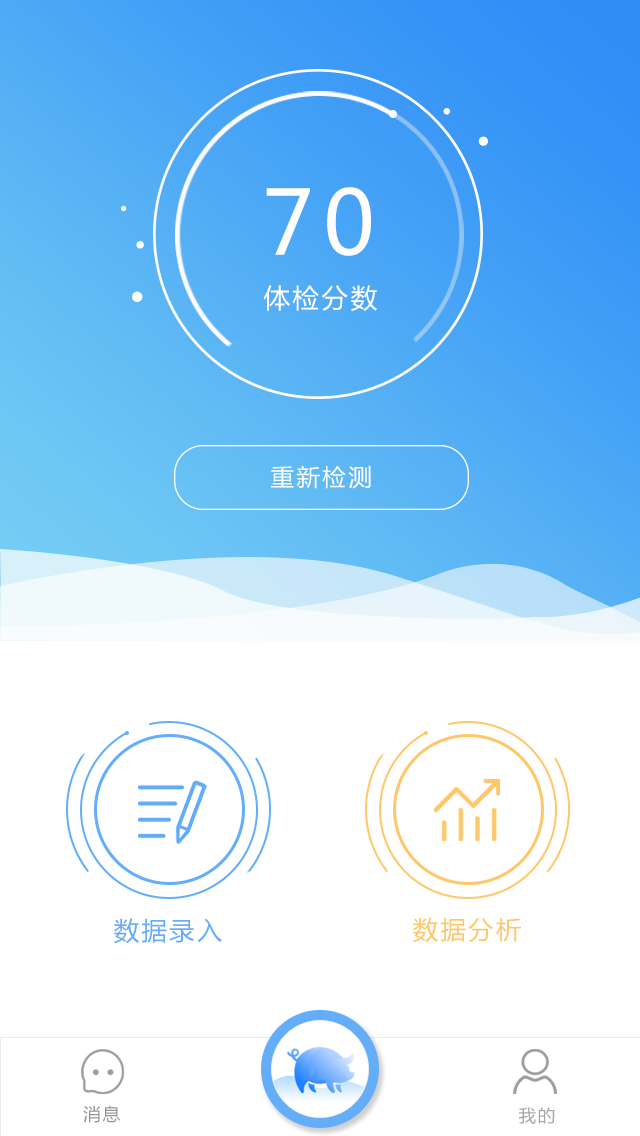
<style>
.page{position:relative;width:640px;height:1136px;background:#ffffff}
.page>*{position:absolute;margin:0}
.t1{font:88.1px "MicrosoftYaHei";letter-spacing:0.1em;color:#fffdfd}
.t2{font:26.4px "MicrosoftYaHei";letter-spacing:0.1em;color:#ffffff}
.t3{font:23.5px "MicrosoftYaHei";letter-spacing:0.1em;color:#fefeff}
.t4{font:25.3px "MicrosoftYaHei";letter-spacing:0.1em;color:#64adf9}
.t5{font:25.3px "MicrosoftYaHei";letter-spacing:0.1em;color:#ffc769}
.t6{font:17.5px "MicrosoftYaHei";letter-spacing:0.1em;color:#939292}
.t7{font:17.5px "MicrosoftYaHei";letter-spacing:0.1em;color:#a6a6a6}
</style>
<div class="page">
<p class="t1" style="left:266px;top:187px;width:105px;height:69px">70</p>
<p class="t2" style="left:263px;top:285px;width:114px;height:26px">体检分数</p>
<p class="t3" style="left:271px;top:465px;width:100px;height:24px">重新检测</p>
<p class="t4" style="left:114px;top:918px;width:108px;height:26px">数据录入</p>
<p class="t5" style="left:413px;top:917px;width:108px;height:26px">数据分析</p>
<p class="t6" style="left:83px;top:1105px;width:37px;height:18px">消息</p>
<p class="t7" style="left:518px;top:1107px;width:37px;height:17px">我的</p>
</div>
